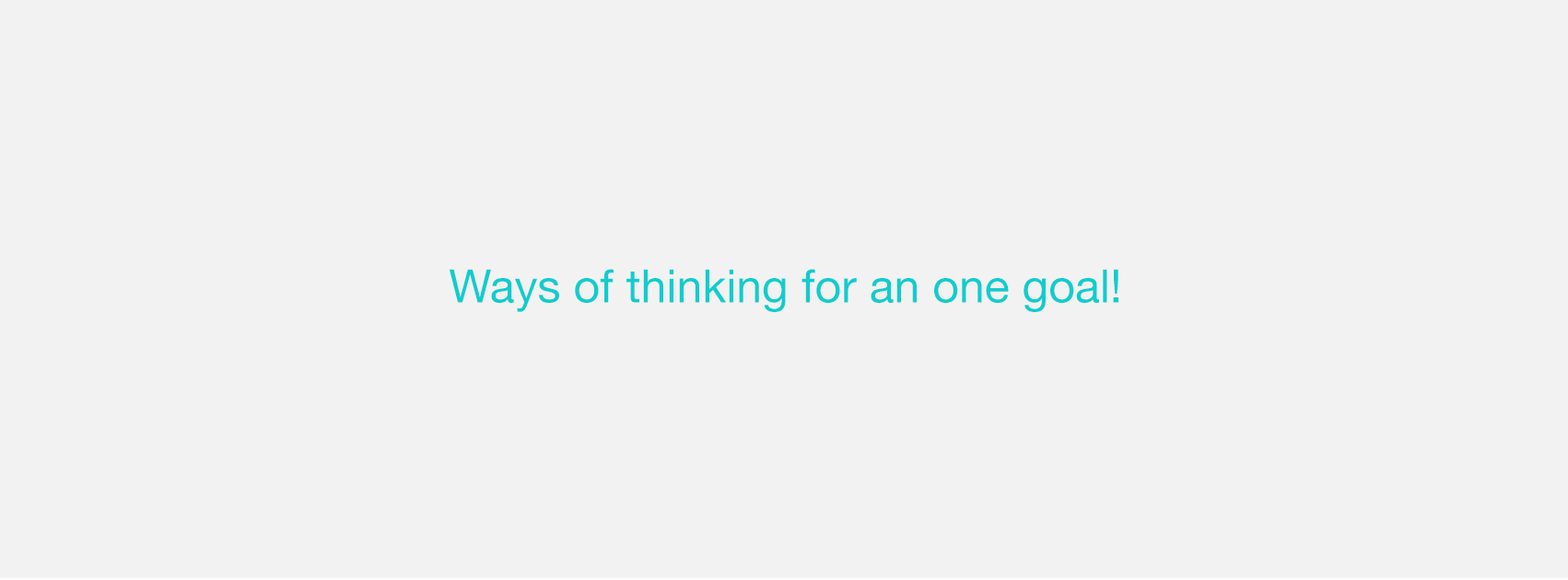
<style>
.page{position:relative;width:1568px;height:580px;background:#f2f2f2}
.page>*{position:absolute;margin:0}
.t1{font:46.1px "HelveticaNeue";color:#11ccce}
</style>
<div class="page">
<p class="t1" style="left:449px;top:269px;width:669px;height:43px">Ways of thinking for an one goal!</p>
</div>
